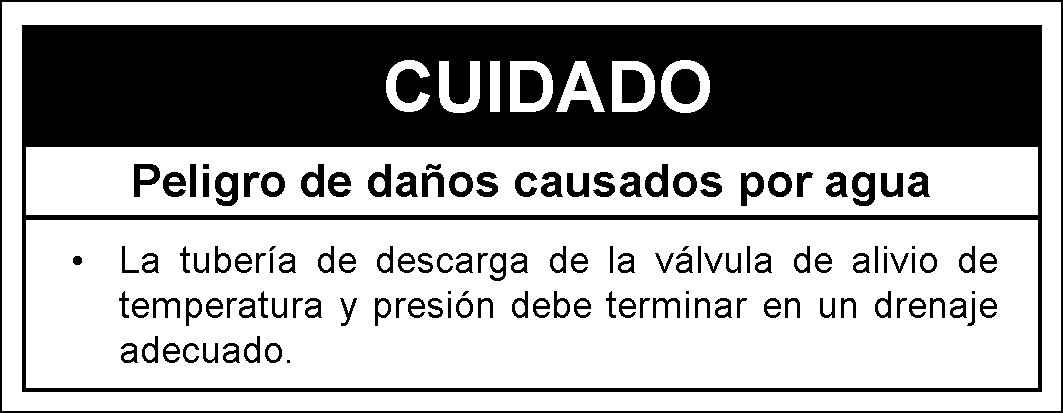
<style>
.page{position:relative;width:1063px;height:413px;background:#ffffff}
.page>*{position:absolute;margin:0}
.t1{font:70.8px "Arial-BoldMT";color:#ffffff}
.t2{font:45.8px "Arial-BoldMT";color:#000000}
.t3{font:37.5px "ArialMT";color:#000000}
</style>
<div class="page">
<p class="t1" style="left:386px;top:60px;width:324px;height:53px">CUIDADO</p>
<p class="t2" style="left:134px;top:164px;width:796px;height:42px">Peligro de daños causados por agua</p>
<p class="t3" style="left:119px;top:246px;width:878px;height:117px;text-align:justify">La tubería de descarga de la válvula de alivio de temperatura y presión debe terminar en un drenaje adecuado.</p>
<p class="t3" style="left:73px;top:256px;width:9px;height:9px">•</p>
</div>
